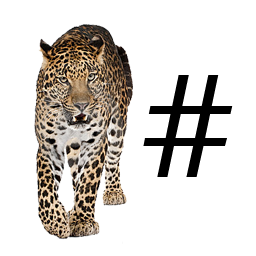
<style>
.page{position:relative;width:256px;height:256px;background:#ffffff}
.page>*{position:absolute;margin:0}
.t1{font:160px "SegoeUI";color:#000000}
</style>
<div class="page">
<p class="t1" style="left:143px;top:75px;width:90px;height:102px">#</p>
</div>
